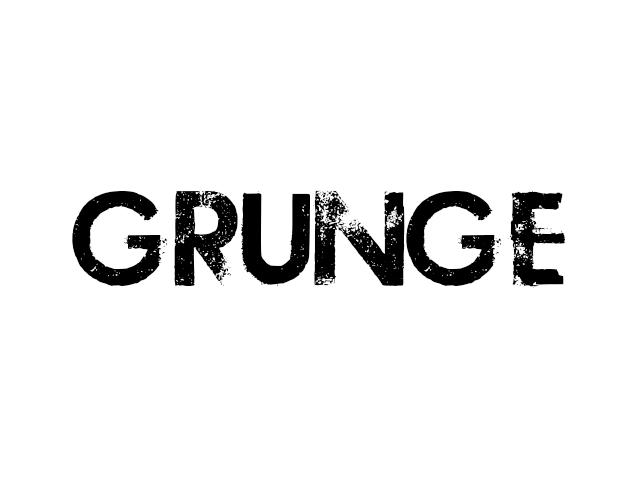
<style>
.page{position:relative;width:640px;height:480px;background:#ffffff}
.page>*{position:absolute;margin:0}
.t1{font:132px "TOSCAZERO";color:#000000}
</style>
<div class="page">
<p class="t1" style="left:72px;top:190px;width:494px;height:98px">GRUNGE</p>
</div>
